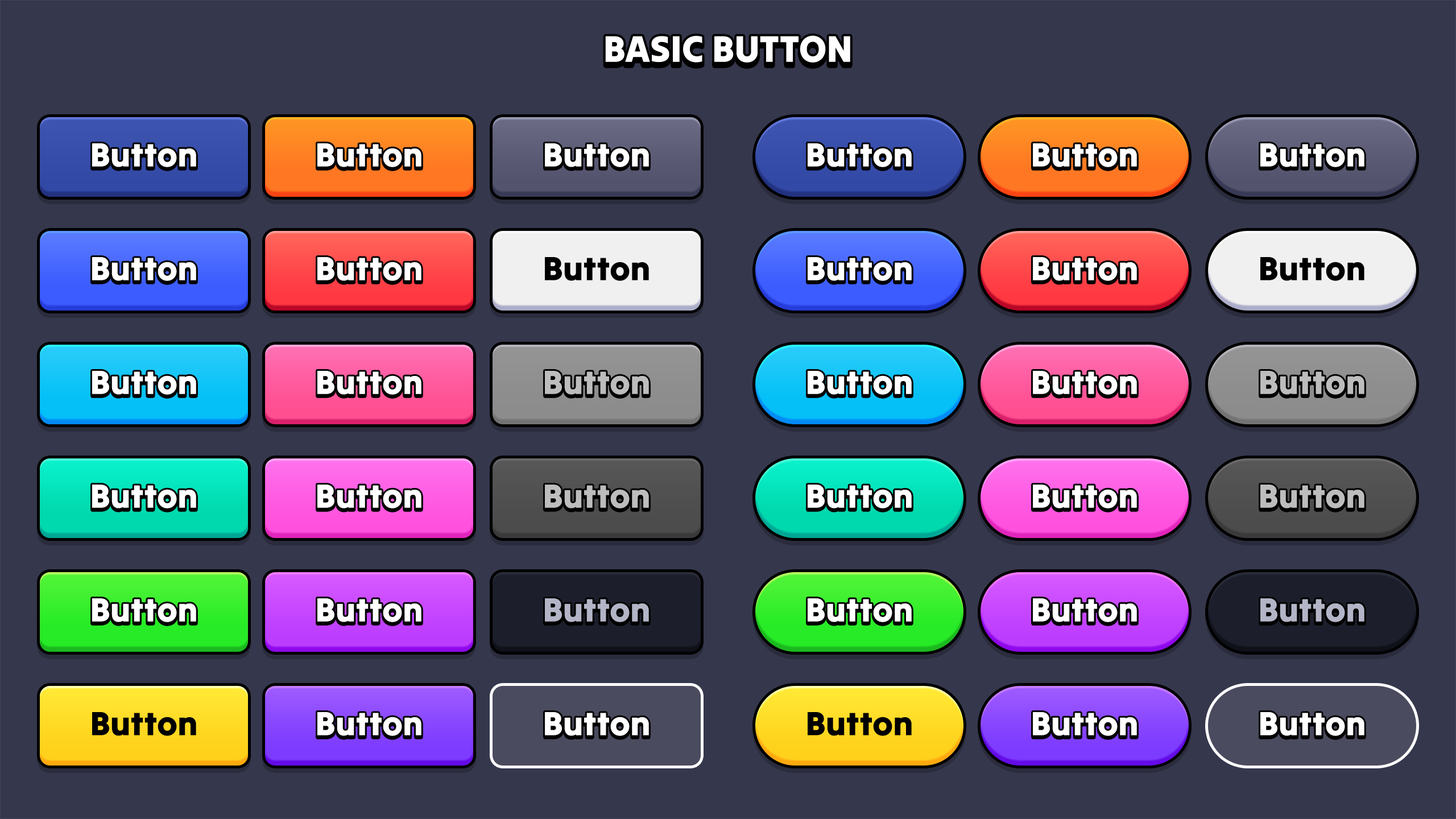
<style>
.page{position:relative;width:1456px;height:819px;background:#35374c}
.page>*{position:absolute;margin:0}
.t1{font:37.5px "TiltWarp-Regular";color:#ffffff;text-transform:uppercase}
.t2{font:34.1px "TiltWarp-Regular";color:#ffffff}
.t3{font:34.1px "TiltWarp-Regular";color:#000000}
.t4{font:34.1px "TiltWarp-Regular";color:#bdbdbd}
.t5{font:34.1px "TiltWarp-Regular";color:#b3b5c7}
</style>
<div class="page">
<p class="t1" style="left:605px;top:35px;width:245px;height:28px">Basic Button</p>
<p class="t2" style="left:92px;top:143px;width:104px;height:24px">Button</p>
<p class="t2" style="left:317px;top:143px;width:104px;height:24px">Button</p>
<p class="t2" style="left:545px;top:143px;width:104px;height:24px">Button</p>
<p class="t2" style="left:808px;top:143px;width:104px;height:24px">Button</p>
<p class="t2" style="left:1033px;top:143px;width:104px;height:24px">Button</p>
<p class="t2" style="left:1260px;top:143px;width:104px;height:24px">Button</p>
<p class="t2" style="left:92px;top:257px;width:104px;height:24px">Button</p>
<p class="t2" style="left:317px;top:257px;width:104px;height:24px">Button</p>
<p class="t3" style="left:545px;top:257px;width:104px;height:24px">Button</p>
<p class="t2" style="left:808px;top:257px;width:104px;height:24px">Button</p>
<p class="t2" style="left:1033px;top:257px;width:104px;height:24px">Button</p>
<p class="t3" style="left:1260px;top:257px;width:104px;height:24px">Button</p>
<p class="t2" style="left:92px;top:371px;width:104px;height:24px">Button</p>
<p class="t2" style="left:317px;top:371px;width:104px;height:24px">Button</p>
<p class="t4" style="left:545px;top:371px;width:104px;height:24px">Button</p>
<p class="t2" style="left:808px;top:371px;width:104px;height:24px">Button</p>
<p class="t2" style="left:1033px;top:371px;width:104px;height:24px">Button</p>
<p class="t4" style="left:1260px;top:371px;width:104px;height:24px">Button</p>
<p class="t2" style="left:92px;top:485px;width:104px;height:23px">Button</p>
<p class="t2" style="left:317px;top:485px;width:104px;height:23px">Button</p>
<p class="t4" style="left:545px;top:485px;width:104px;height:23px">Button</p>
<p class="t2" style="left:808px;top:485px;width:104px;height:23px">Button</p>
<p class="t2" style="left:1033px;top:485px;width:104px;height:23px">Button</p>
<p class="t4" style="left:1260px;top:485px;width:104px;height:23px">Button</p>
<p class="t2" style="left:92px;top:598px;width:104px;height:24px">Button</p>
<p class="t2" style="left:317px;top:598px;width:104px;height:24px">Button</p>
<p class="t5" style="left:545px;top:598px;width:104px;height:24px">Button</p>
<p class="t2" style="left:808px;top:598px;width:104px;height:24px">Button</p>
<p class="t2" style="left:1033px;top:598px;width:104px;height:24px">Button</p>
<p class="t5" style="left:1260px;top:598px;width:104px;height:24px">Button</p>
<p class="t3" style="left:92px;top:712px;width:104px;height:24px">Button</p>
<p class="t2" style="left:317px;top:712px;width:104px;height:24px">Button</p>
<p class="t2" style="left:545px;top:712px;width:104px;height:24px">Button</p>
<p class="t3" style="left:808px;top:712px;width:104px;height:24px">Button</p>
<p class="t2" style="left:1033px;top:712px;width:104px;height:24px">Button</p>
<p class="t2" style="left:1260px;top:712px;width:104px;height:24px">Button</p>
</div>
